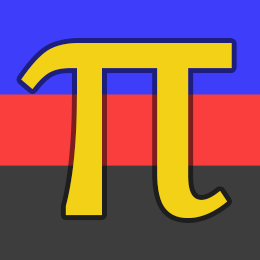
<style>
.page{position:relative;width:260px;height:260px;background:#3d3d3d}
.page>*{position:absolute;margin:0}
.t1{font:88.2px "Cambria";color:#f3d117}
</style>
<div class="page">
<p class="t1" style="left:21px;top:43px;width:211px;height:175px;text-align:center">π</p>
</div>
